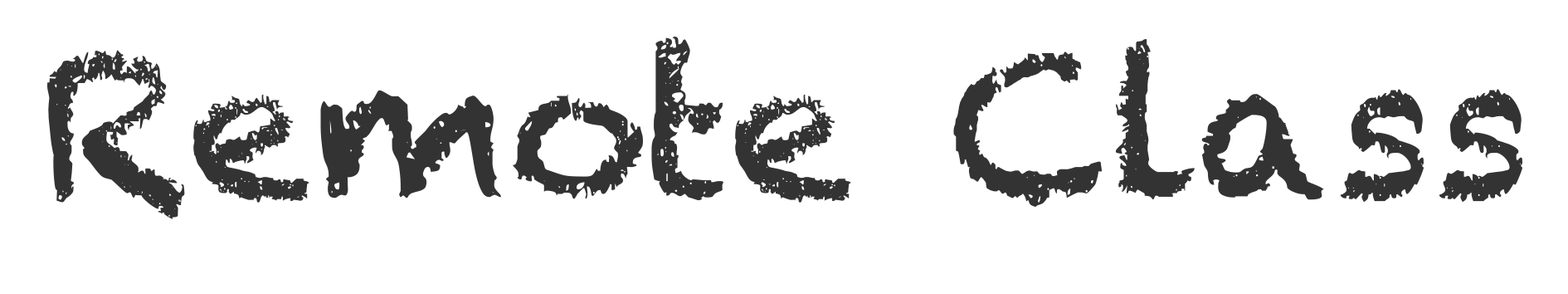
<style>
.page{position:relative;width:1568px;height:294px;background:#ffffff}
.page>*{position:absolute;margin:0}
.t1{font:47.1px "Chalkduster";color:#333333}
</style>
<div class="page">
<p class="t1" style="left:46px;top:37px;width:1476px;height:182px;text-align:center">Remote Class</p>
</div>
